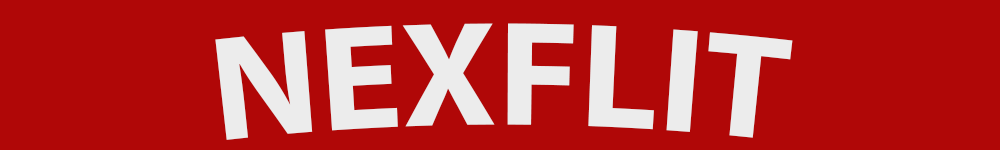
<style>
.page{position:relative;width:1000px;height:150px;background:#b00707}
.page>*{position:absolute;margin:0}
.t1{font:150px "MyriadPro-Bold";color:#ececec}
</style>
<div class="page">
<p class="t1" style="left:215px;top:23px;width:578px;height:117px">NEXFLIT</p>
</div>
